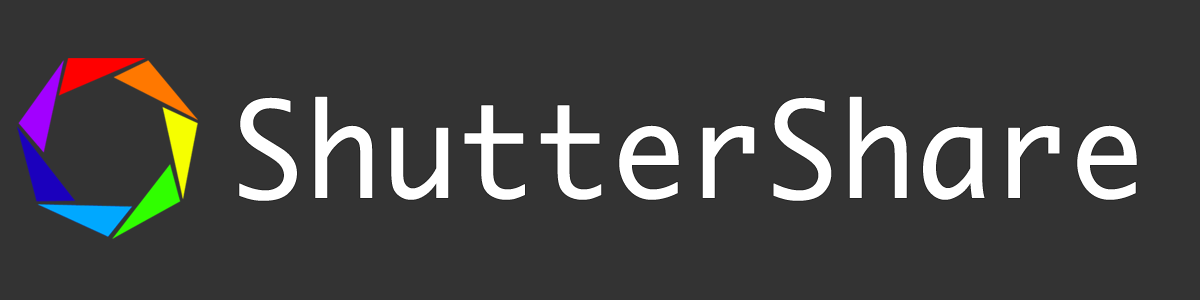
<style>
.page{position:relative;width:1200px;height:300px;background:#333333}
.page>*{position:absolute;margin:0}
.t1{font:127.5px "Monaco";letter-spacing:-0.01em;color:#ffffff;font-weight:bold}
</style>
<div class="page">
<p class="t1" style="left:239px;top:96px;width:898px;height:105px">ShutterShare</p>
</div>
